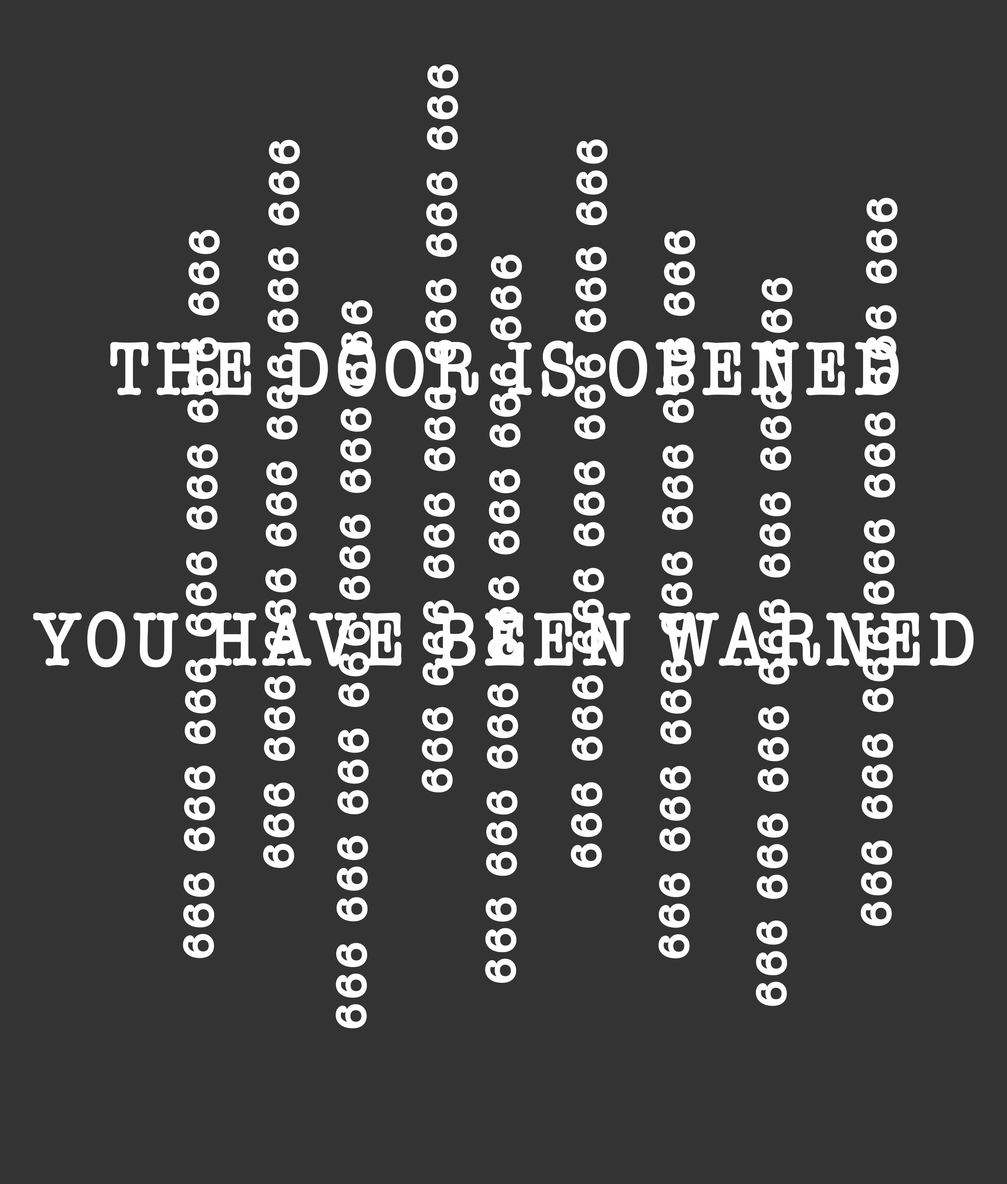
<style>
.page{position:relative;width:1007px;height:1184px;background:#333333}
.page>*{position:absolute;margin:0}
.t1{font:40.1px "AmericanTypewriter";letter-spacing:0.1em;color:#ffffff;text-transform:uppercase;font-weight:bold}
.t2{font:75.1px "AmericanTypewriter";letter-spacing:0.1em;color:#ffffff;text-transform:uppercase;font-weight:bold;scale:0.82 1}
</style>
<div class="page">
<p class="t1" style="left:422px;top:64px;width:37px;height:728px;rotate:-90deg">666 666 666 666 666 666 666</p>
<p class="t1" style="left:263px;top:140px;width:37px;height:728px;rotate:-90deg">666 666 666 666 666 666 666</p>
<p class="t1" style="left:571px;top:139px;width:37px;height:729px;rotate:-90deg">666 666 666 666 666 666 666</p>
<p class="t1" style="left:861px;top:198px;width:37px;height:728px;rotate:-90deg">666 666 666 666 666 666 666</p>
<p class="t1" style="left:183px;top:230px;width:37px;height:728px;rotate:-90deg">666 666 666 666 666 666 666</p>
<p class="t1" style="left:659px;top:230px;width:37px;height:728px;rotate:-90deg">666 666 666 666 666 666 666</p>
<p class="t1" style="left:485px;top:254px;width:37px;height:729px;rotate:-90deg">666 666 666 666 666 666 666</p>
<p class="t1" style="left:756px;top:278px;width:37px;height:728px;rotate:-90deg">666 666 666 666 666 666 666</p>
<p class="t1" style="left:336px;top:300px;width:37px;height:728px;rotate:-90deg">666 666 666 666 666 666 666</p>
<p class="t2" style="left:33px;top:340px;width:941px;height:327px;text-align:center">The door is opened<br><br><br>You have been warned</p>
</div>
